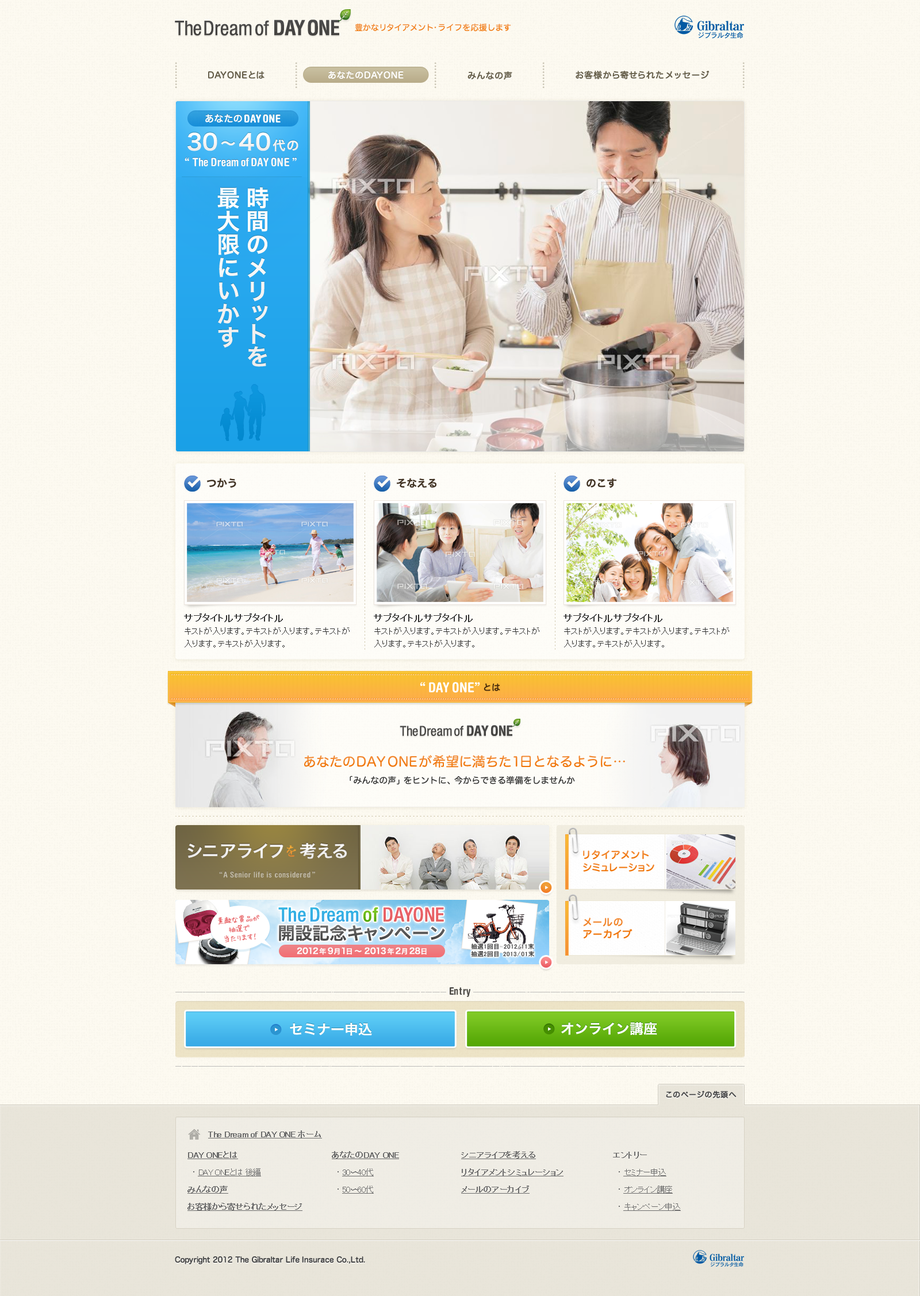
<style>
.page{position:relative;width:920px;height:1296px}
.page>*{position:absolute;margin:0}
.t1{font:20.1px "Helvetica57-Condensed";color:#474644}
.t2{font:20.1px "Helvetica-CondensedBold";color:#474644}
.t3{font:8.1px "HiraMaruProN-W4";color:#f18020}
.t4{font:8.6px "HiraMaruProN-W4";letter-spacing:0.05em;color:#665f4a;font-weight:bold}
.t5{font:8.6px "HiraMaruProN-W4";letter-spacing:0.05em;color:#ffffff;font-weight:bold}
.t6{font:10.9px "HelveticaRounded-CondBold";color:#ffffff}
.t7{font:9.2px "HiraMaruProN-W4";letter-spacing:0.05em;color:#f0ab00;font-weight:bold}
.t8{font:21.9px "HiraKakuPro-W6";color:#f5f5f5}
.t9{font:15.1px "HiraKakuPro-W6";color:#f5f5f5}
.t10{font:12.7px "HiraKakuPro-W6";color:#f5f5f5}
.t11{font:11.5px "HelveticaRounded-CondBold";color:#ffffff}
.t12{font:23px/29.3px "HiraKakuPro-W6";letter-spacing:0.01em;color:#ffffff}
.t13{font:10.4px "HiraKakuPro-W6";color:#423425}
.t14{font:8.6px/12.7px "MS-PGothic";color:#333333}
.t15{font:9.2px/12.7px "MS-PGothic";color:#333333;font-weight:bold}
.t16{font:8.6px/11.5px "MS-PGothic";color:#333333}
.t17{font:13.8px "HelveticaRounded-CondBold";color:#ffffff}
.t18{font:8.6px "HiraMaruProN-W4";color:#482d0c;font-weight:bold}
.t19{font:13.5px "Helvetica57-Condensed";color:#474644}
.t20{font:13.5px "Helvetica-CondensedBold";color:#474644}
.t21{font:13.2px "HiraMaruProN-W4"}
.t22{font:8.6px "HiraMaruPro-W4";color:#333333}
.t23{font:17.3px "HiraKakuPro-W6";color:#efeeee}
.t24{font:13.2px "RyuminPro-Medium";color:#eb9a34}
.t25{font:9.8px "HiraMaruProN-W4";color:#f18224;font-weight:bold}
.t26{font:9.8px "HiraMaruProN-W4";color:#f17d1b;font-weight:bold}
.t27{font:8.1px "HelveticaRounded-CondBold";letter-spacing:0.05em;color:#c5bfad}
.t28{font:7.5px/9.2px "HuiFontP";letter-spacing:-0.05em;color:#e76164}
.t29{font:19.6px "Helvetica67-CondensedMedium";color:#35aee5}
.t30{font:19.6px "Helvetica67-CondensedMedium";color:#69b815}
.t31{font:19.6px "Helvetica67-CondensedMedium";color:#e76165}
.t32{font:9.8px/12.1px "HiraMaruProN-W4";letter-spacing:0.02em;font-weight:bold}
.t33{font:17.3px "HiraKakuPro-W6";color:#565656}
.t34{font:8.1px "HiraKakuPro-W6";color:#ffffff}
.t35{font:6.9px "HiraKakuPro-W6";color:#ffffff}
.t36{font:7.5px "HiraKakuPro-W6";color:#ffffff}
.t37{font:6.3px/7.5px "MS-PGothic";color:#323232}
.t38{font:10.4px "HelveticaRounded-CondBold";color:#4e4c48}
.t39{font:13.8px "HiraKakuPro-W6";color:#ffffff}
.t40{font:7.5px "HiraMaruProN-W4";letter-spacing:-0.03em;color:#444444;font-weight:bold}
.t41{font:8.1px "MS-PGothic";letter-spacing:-0.03em;color:#6d6d6d;font-weight:bold;text-decoration:underline}
.t42{font:8.1px/17.3px "MS-PGothic";letter-spacing:-0.03em;color:#6d6d6d;font-weight:bold;text-decoration:underline}
.t43{font:8.1px/17.3px "MS-PGothic";letter-spacing:-0.03em;color:#6d6d6d}
.t44{font:8.1px/17.3px "MS-PGothic";letter-spacing:-0.03em;color:#6d6d6d;text-decoration:underline}
.t45{font:8.1px/17.3px "MS-PGothic";letter-spacing:-0.03em;color:#6d6d6d;font-weight:bold}
</style>
<div class="page">
<p class="t1" style="left:175px;top:20px;width:164px;height:16px">The Dream of <span class="t2">DAY ONE</span></p>
<p class="t3" style="left:355px;top:24px;width:156px;height:8px">豊かなリタイアメント・ライフを応援します</p>
<p class="t4" style="left:208px;top:71px;width:57px;height:8px">DAYONEとは</p>
<p class="t5" style="left:328px;top:71px;width:76px;height:8px">あなたのDAYONE</p>
<p class="t4" style="left:467px;top:71px;width:45px;height:9px">みんなの声</p>
<p class="t4" style="left:576px;top:71px;width:134px;height:8px">お客様から寄せられたメッセージ</p>
<p class="t6" style="left:205px;top:114px;width:76px;height:9px"><span class="t7">あなたの</span>DAYONE</p>
<p class="t8" style="left:187px;top:132px;width:111px;height:20px">30<span class="t9">〜</span>40<span class="t10">代の</span></p>
<p class="t11" style="left:185px;top:158px;width:112px;height:9px">“ The Dream of DAY ONE”</p>
<p class="t12" style="left:217px;top:187px;width:52px;height:180px">時間のメリットを<br>最大限にいかす</p>
<p class="t13" style="left:207px;top:478px;width:29px;height:10px">つかう</p>
<p class="t13" style="left:397px;top:478px;width:39px;height:10px">そなえる</p>
<p class="t13" style="left:587px;top:478px;width:29px;height:10px">のこす</p>
<p class="t14" style="left:184px;top:614px;width:166px;height:33px"><span class="t15">サブタイトルサブタイトル<br></span>キストが入ります。テキストが入ります。<span class="t16">テキストが入ります。</span>テキストが入ります。</p>
<p class="t14" style="left:374px;top:614px;width:165px;height:33px"><span class="t15">サブタイトルサブタイトル<br></span>キストが入ります。テキストが入ります。<span class="t16">テキストが入ります。</span>テキストが入ります。</p>
<p class="t14" style="left:564px;top:614px;width:165px;height:33px"><span class="t15">サブタイトルサブタイトル<br></span>キストが入ります。テキストが入ります。<span class="t16">テキストが入ります。</span>テキストが入ります。</p>
<p class="t17" style="left:420px;top:682px;width:60px;height:11px">“ DAY ONE”</p>
<p class="t18" style="left:484px;top:683px;width:16px;height:8px">とは</p>
<p class="t19" style="left:400px;top:725px;width:112px;height:11px">The Dream of <span class="t20">DAY ONE</span></p>
<p class="t21" style="left:304px;top:755px;width:321px;height:13px">あなたのDAY ONEが希望に満ちた1日となるように…</p>
<p class="t22" style="left:350px;top:776px;width:225px;height:9px">「みんなの声」をヒントに、今からできる準備をしませんか</p>
<p class="t23" style="left:187px;top:842px;width:160px;height:17px">シニアライフ   考える</p>
<p class="t24" style="left:286px;top:845px;width:10px;height:12px">を</p>
<p class="t25" style="left:583px;top:850px;width:66px;height:10px">リタイアメント</p>
<p class="t26" style="left:583px;top:863px;width:71px;height:9px">シミュレーション</p>
<p class="t27" style="left:219px;top:871px;width:96px;height:7px">“A Senior life is considered”</p>
<p class="t28" style="left:218px;top:915px;width:42px;height:27px;text-align:center;rotate:-5deg">素敵な賞品が<br>抽選で<br>当たります！</p>
<p class="t29" style="left:278px;top:907px;width:81px;height:15px">The Dream</p>
<p class="t30" style="left:363px;top:907px;width:15px;height:15px">of</p>
<p class="t31" style="left:384px;top:907px;width:60px;height:15px">DAY ONE</p>
<p class="t32" style="left:583px;top:918px;width:50px;height:20px">メールの<br>アーカイブ</p>
<p class="t33" style="left:279px;top:925px;width:166px;height:16px">開設記念キャンペーン</p>
<p class="t34" style="left:297px;top:947px;width:130px;height:8px">2012<span class="t35">年</span>9<span class="t35">月</span>1<span class="t35">日</span><span class="t36">〜</span>2013<span class="t35">年</span>2<span class="t35">月</span>28<span class="t35">日</span></p>
<p class="t37" style="left:471px;top:944px;width:63px;height:13px">抽選1回目　2012/11末<br>抽選2回目  2013/01末</p>
<p class="t38" style="left:450px;top:987px;width:20px;height:10px">Entry</p>
<p class="t39" style="left:290px;top:1022px;width:82px;height:14px">セミナー申込</p>
<p class="t39" style="left:561px;top:1022px;width:96px;height:13px">オンライン講座</p>
<p class="t40" style="left:666px;top:1091px;width:71px;height:7px">このページの先頭へ</p>
<p class="t41" style="left:208px;top:1130px;width:114px;height:9px">The Dream of DAY ONE ホーム</p>
<p class="t42" style="left:187px;top:1151px;width:115px;height:60px">DAY ONEとは<br><span class="t43">　・ </span><span class="t44">DAY ONEとは 後編<br></span>みんなの声<br>お客様から寄せられたメッセージ</p>
<p class="t42" style="left:332px;top:1151px;width:67px;height:43px">あなたのDAY ONE<br><span class="t43">　・ </span><span class="t44">30〜40代<br></span><span class="t43">　・ </span><span class="t44">50〜60代</span></p>
<p class="t42" style="left:461px;top:1151px;width:103px;height:43px">シニアライフを考える<br>リタイアメントシミュレーション<br>メールのアーカイブ</p>
<p class="t44" style="left:613px;top:1152px;width:68px;height:59px"><span class="t45">エントリー<br></span><span class="t43">　・ </span>セミナー申込<br><span class="t43">　・ </span>オンライン講座<br><span class="t43">　・ </span>キャンペーン申込</p>
<p class="t40" style="left:175px;top:1256px;width:190px;height:8px">Copyright 2012 The Gibraltar Life Insurace Co.,Ltd.</p>
</div>
